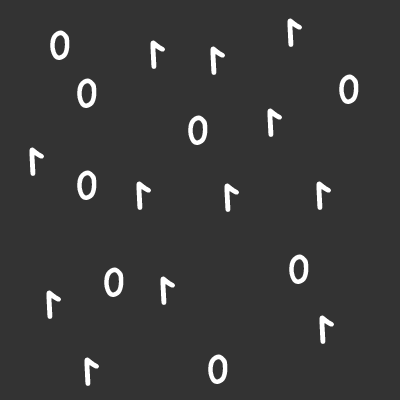
<style>
.page{position:relative;width:400px;height:400px;background:#333333}
.page>*{position:absolute;margin:0}
.t1{font:50.8px "Brutal_bounce-Regular";color:#ffffff}
</style>
<div class="page">
<p class="t1" style="left:50px;top:30px;width:20px;height:30px;rotate:180deg">0</p>
<p class="t1" style="left:287px;top:18px;width:15px;height:29px;rotate:180deg">1</p>
<p class="t1" style="left:150px;top:40px;width:15px;height:29px;rotate:180deg">1</p>
<p class="t1" style="left:210px;top:46px;width:15px;height:29px;rotate:180deg">1</p>
<p class="t1" style="left:77px;top:78px;width:20px;height:30px;rotate:180deg">0</p>
<p class="t1" style="left:339px;top:74px;width:20px;height:30px;rotate:180deg">0</p>
<p class="t1" style="left:267px;top:108px;width:15px;height:29px;rotate:180deg">1</p>
<p class="t1" style="left:188px;top:115px;width:20px;height:30px;rotate:180deg">0</p>
<p class="t1" style="left:29px;top:147px;width:15px;height:29px;rotate:180deg">1</p>
<p class="t1" style="left:77px;top:170px;width:20px;height:30px;rotate:180deg">0</p>
<p class="t1" style="left:136px;top:181px;width:15px;height:29px;rotate:180deg">1</p>
<p class="t1" style="left:224px;top:183px;width:15px;height:29px;rotate:180deg">1</p>
<p class="t1" style="left:316px;top:181px;width:15px;height:29px;rotate:180deg">1</p>
<p class="t1" style="left:289px;top:254px;width:20px;height:30px;rotate:180deg">0</p>
<p class="t1" style="left:104px;top:267px;width:20px;height:30px;rotate:180deg">0</p>
<p class="t1" style="left:160px;top:276px;width:15px;height:29px;rotate:180deg">1</p>
<p class="t1" style="left:46px;top:290px;width:15px;height:29px;rotate:180deg">1</p>
<p class="t1" style="left:319px;top:315px;width:15px;height:29px;rotate:180deg">1</p>
<p class="t1" style="left:84px;top:357px;width:15px;height:29px;rotate:180deg">1</p>
<p class="t1" style="left:208px;top:354px;width:20px;height:30px;rotate:180deg">0</p>
</div>
